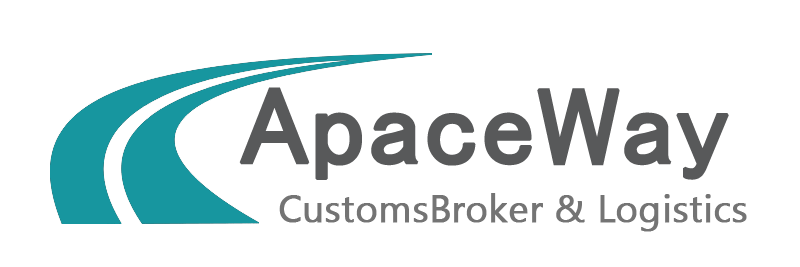
<style>
.page{position:relative;width:800px;height:267px;background:#ffffff}
.page>*{position:absolute;margin:0}
.t1{font:108.9px "MS-UIGothic";color:#58595a;font-weight:bold}
.t2{font:37.6px "SegoeUISymbol";color:#747474;font-weight:bold}
</style>
<div class="page">
<p class="t1" style="left:239px;top:87px;width:490px;height:93px">ApaceWay</p>
<p class="t2" style="left:279px;top:193px;width:468px;height:39px">CustomsBroker &amp; Logistics</p>
</div>
